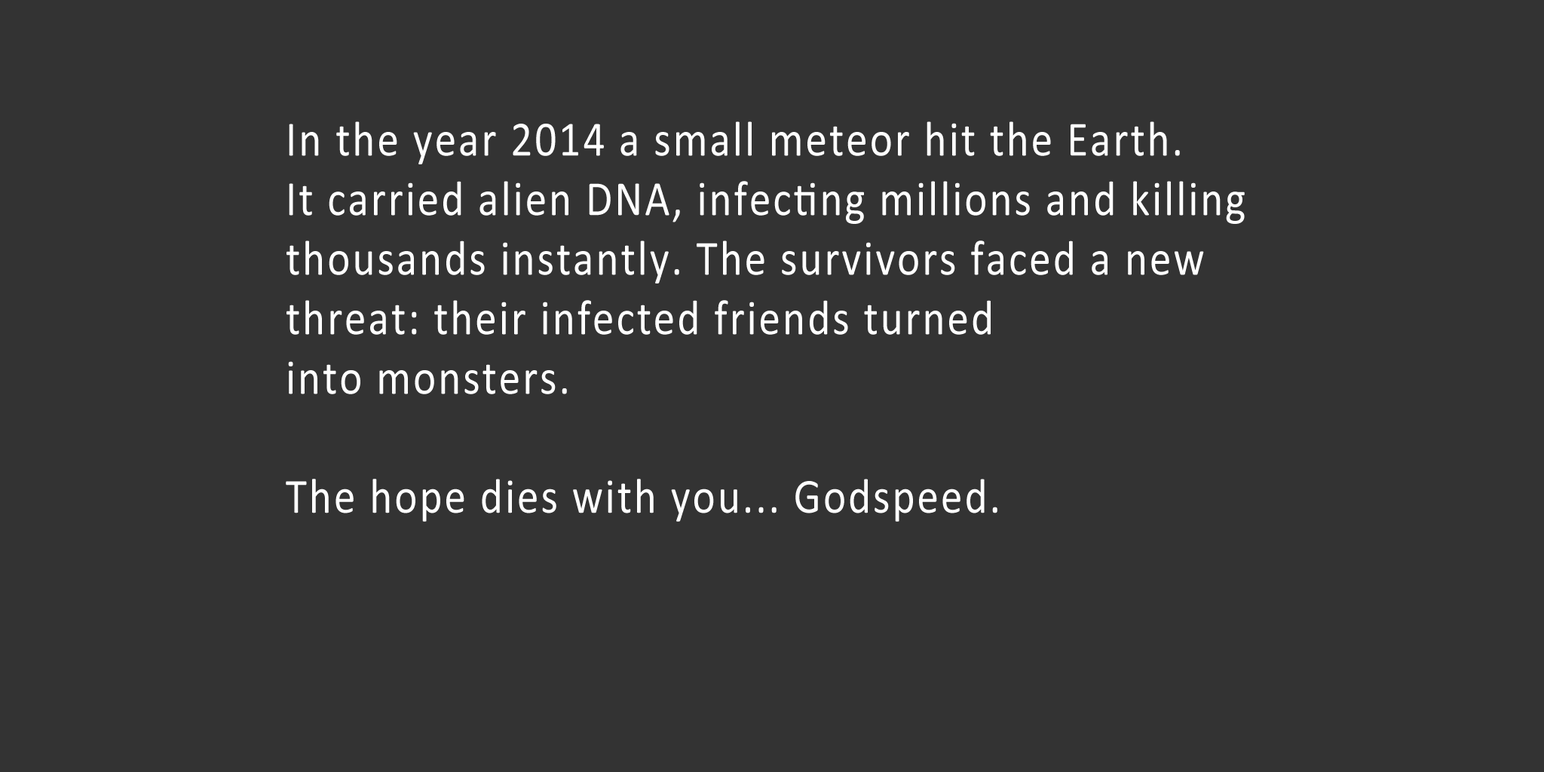
<style>
.page{position:relative;width:1544px;height:772px;background:#333333}
.page>*{position:absolute;margin:0}
.t1{font:49.6px "Calibri";letter-spacing:0.05em;color:#ffffff;scale:0.87 1}
</style>
<div class="page">
<p class="t1" style="left:286px;top:121px;width:959px;height:401px">In the year 2014 a small meteor hit the Earth.<br>It carried alien DNA, infecting millions and killing<br>thousands instantly. The survivors faced a new<br>threat: their infected friends turned<br>into monsters. <br><br>The hope dies with you... Godspeed.</p>
</div>
